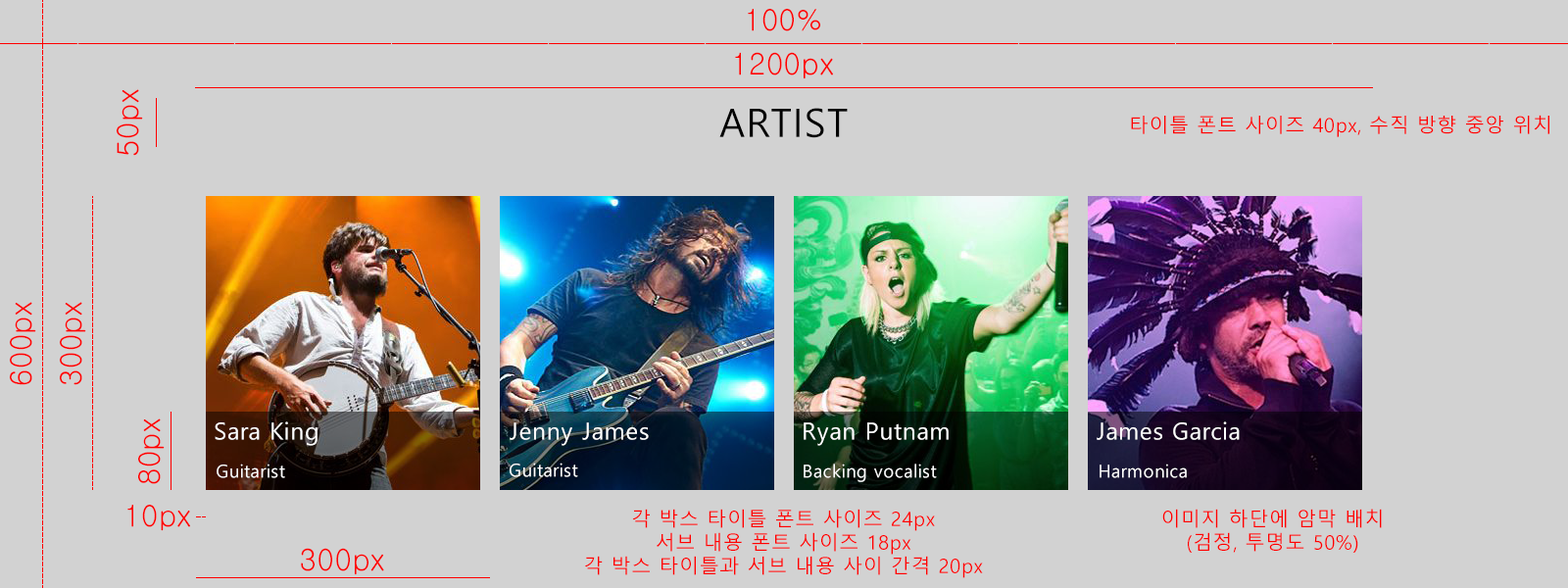
<style>
.page{position:relative;width:1568px;height:588px;background:#d2d2d2}
.page>*{position:absolute;margin:0}
.t1{font:29.4px "Gulim";letter-spacing:0.03em;color:#ff0000}
.t2{font:29.7px "Gulim";letter-spacing:0.03em;color:#ff0000}
.t3{font:39.2px "MalgunGothic";letter-spacing:0.03em;color:#000000}
.t4{font:19.6px "MalgunGothic";letter-spacing:0.03em;color:#ff0000}
.t5{font:23.5px "MalgunGothic";letter-spacing:0.03em;color:#ffffff}
.t6{font:17.6px "MalgunGothic";letter-spacing:0.03em;color:#ffffff}
.t7{font:29.3px "Gulim";letter-spacing:0.03em;color:#ff0000}
.t8{font:29.6px "Gulim";letter-spacing:0.03em;color:#ff0000}
</style>
<div class="page">
<p class="t1" style="left:748px;top:9px;width:72px;height:22px">100%</p>
<p class="t2" style="left:735px;top:52px;width:98px;height:27px">1200px</p>
<p class="t1" style="left:117px;top:89px;width:26px;height:67px;rotate:-90deg">50px</p>
<p class="t3" style="left:719px;top:108px;width:129px;height:30px">ARTIST</p>
<p class="t4" style="left:1131px;top:115px;width:418px;height:22px">타이틀 폰트 사이즈 40px, 수직 방향 중앙 위치</p>
<p class="t1" style="left:10px;top:302px;width:26px;height:83px;rotate:-90deg">600px</p>
<p class="t1" style="left:60px;top:302px;width:26px;height:83px;rotate:-90deg">300px</p>
<p class="t1" style="left:138px;top:418px;width:27px;height:66px;rotate:-90deg">80px</p>
<p class="t5" style="left:215px;top:421px;width:103px;height:25px">Sara King</p>
<p class="t5" style="left:510px;top:422px;width:139px;height:24px">Jenny James</p>
<p class="t5" style="left:804px;top:422px;width:145px;height:24px">Ryan Putnam</p>
<p class="t5" style="left:1097px;top:421px;width:143px;height:19px">James Garcia</p>
<p class="t6" style="left:217px;top:464px;width:68px;height:14px">Guitarist</p>
<p class="t6" style="left:510px;top:463px;width:68px;height:14px">Guitarist</p>
<p class="t6" style="left:804px;top:464px;width:133px;height:18px">Backing vocalist</p>
<p class="t6" style="left:1100px;top:464px;width:87px;height:14px">Harmonica</p>
<p class="t7" style="left:127px;top:505px;width:63px;height:26px">10px</p>
<p class="t4" style="left:585px;top:509px;width:398px;height:69px;text-align:center">각 박스 타이틀 폰트 사이즈 24px<br>서브 내용 폰트 사이즈 18px<br>각 박스 타이틀과 서브 내용 사이 간격 20px</p>
<p class="t4" style="left:1162px;top:509px;width:220px;height:44px;text-align:center">이미지 하단에 암막 배치<br>(검정, 투명도 50%)</p>
<p class="t8" style="left:301px;top:548px;width:83px;height:27px">300px</p>
</div>
